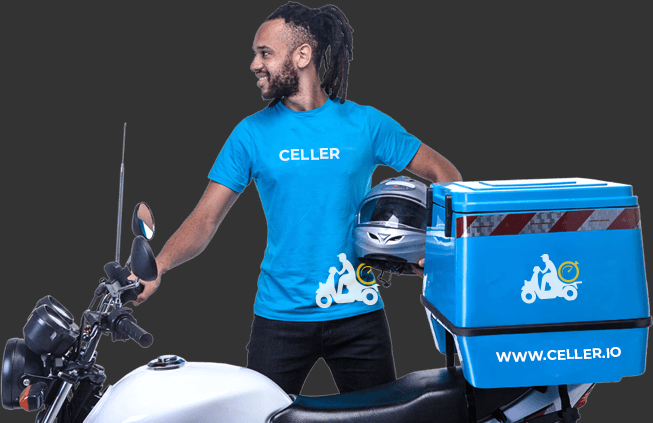
<style>
.page{position:relative;width:653px;height:423px;background:#333333}
.page>*{position:absolute;margin:0}
.t1{font:15.3px "Montserrat-Bold";color:#e6f4ff}
.t2{font:13.8px "Montserrat-Bold";color:#ffffff}
</style>
<div class="page">
<p class="t1" style="left:279px;top:148px;width:61px;height:13px;rotate:-2deg">CELLER</p>
<p class="t2" style="left:496px;top:347px;width:125px;height:15px;rotate:-2deg">WWW.CELLER.IO</p>
</div>
